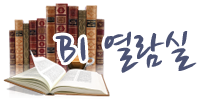
<style>
.page{position:relative;width:200px;height:100px;background:#ffffff}
.page>*{position:absolute;margin:0}
.t1{font:43.8px "NanumBrush";color:#4b5273;font-weight:bold}
</style>
<div class="page">
<p class="t1" style="left:55px;top:31px;width:142px;height:42px">B1 열람실</p>
</div>
